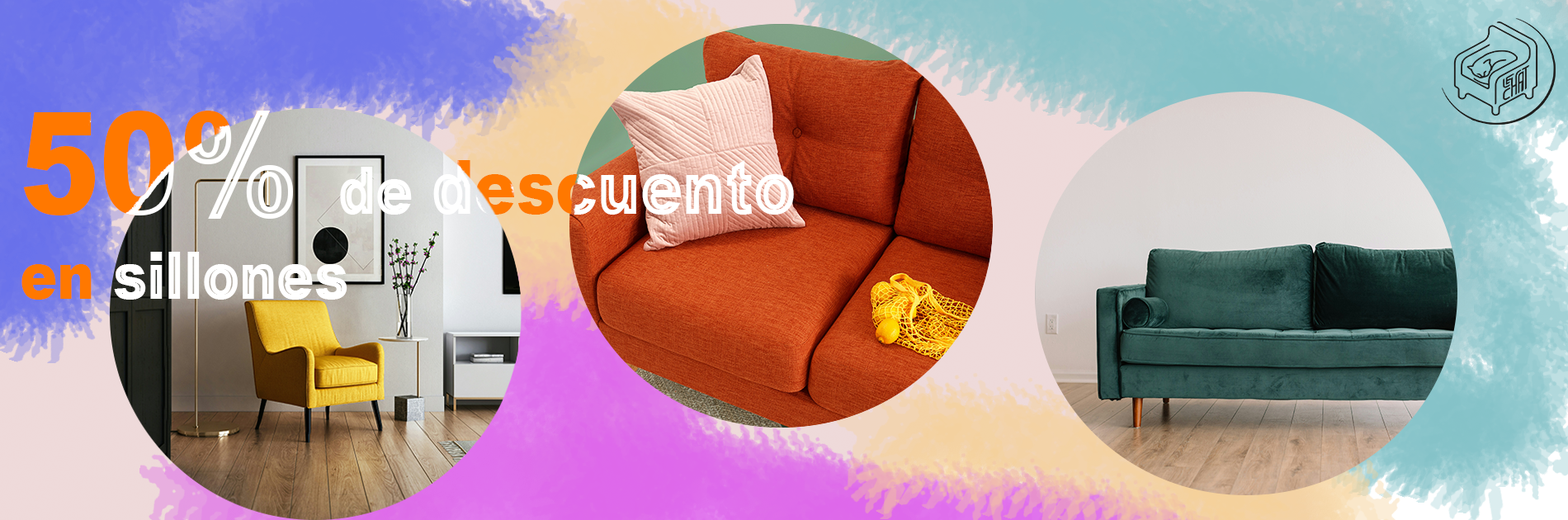
<style>
.page{position:relative;width:1568px;height:520px}
.page>*{position:absolute;margin:0}
.t1{font:66.1px/84.9px "Arial-Black";scale:0.84 1}
.t2{font:141.5px/84.9px "Arial-Black";scale:0.84 1}
.t3{font:75.5px/84.9px "Arial-Black";scale:0.84 1}
</style>
<div class="page">
<p class="t1" style="left:21px;top:111px;width:773px;height:189px"><span class="t2">50% </span>de <span class="t3">descuento <br></span>en sillones</p>
<p class="t1" style="left:21px;top:111px;width:773px;height:189px"><span class="t2">50% </span>de <span class="t3">descuento <br></span>en sillones</p>
</div>
